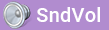
<style>
.page{position:relative;width:109px;height:30px;background:#b18ccf}
.page>*{position:absolute;margin:0}
.t1{font:20px "Roboto-Medium";color:#ffffff}
</style>
<div class="page">
<p class="t1" style="left:37px;top:7px;width:63px;height:15px">SndVol</p>
</div>
